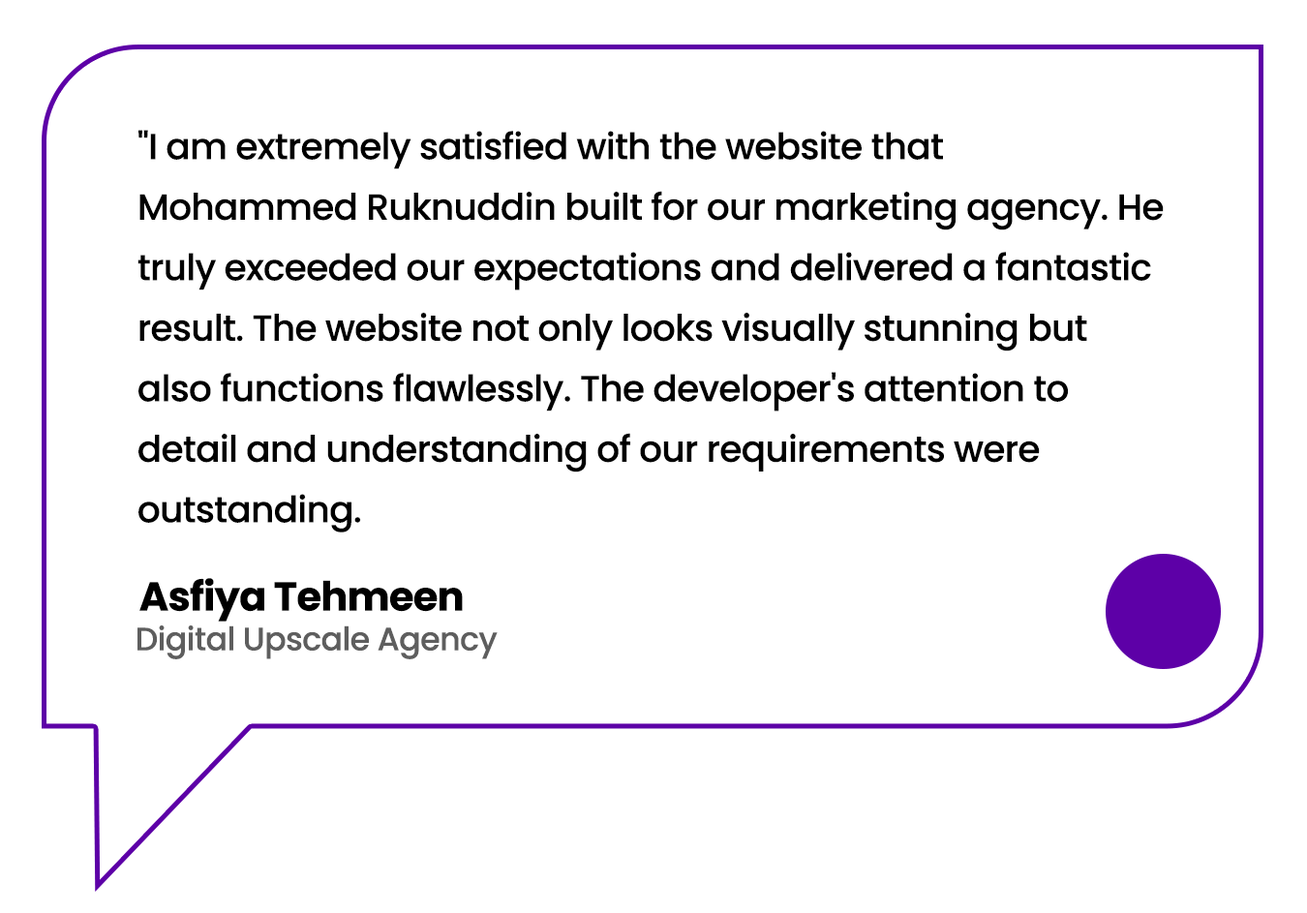
<style>
.page{position:relative;width:1307px;height:913px;background:#ffffff}
.page>*{position:absolute;margin:0}
.t1{font:36.3px/60.5px "Poppins-Medium";letter-spacing:-0.02em;color:#000000}
.t2{font:40.4px "Poppins-Bold";letter-spacing:-0.02em;color:#000000}
.t3{font:32.3px "Poppins-Medium";letter-spacing:-0.02em;color:#5e5e5e}
</style>
<div class="page">
<p class="t1" style="left:137px;top:130px;width:1026px;height:402px">"I am extremely satisfied with the website that Mohammed Ruknuddin built for our marketing agency. He truly exceeded our expectations and delivered a fantastic result. The website not only looks visually stunning but also functions flawlessly. The developer's attention to detail and understanding of our requirements were outstanding.</p>
<p class="t2" style="left:139px;top:578px;width:324px;height:43px">Asfiya Tehmeen</p>
<p class="t3" style="left:137px;top:624px;width:360px;height:35px">Digital Upscale Agency</p>
</div>
